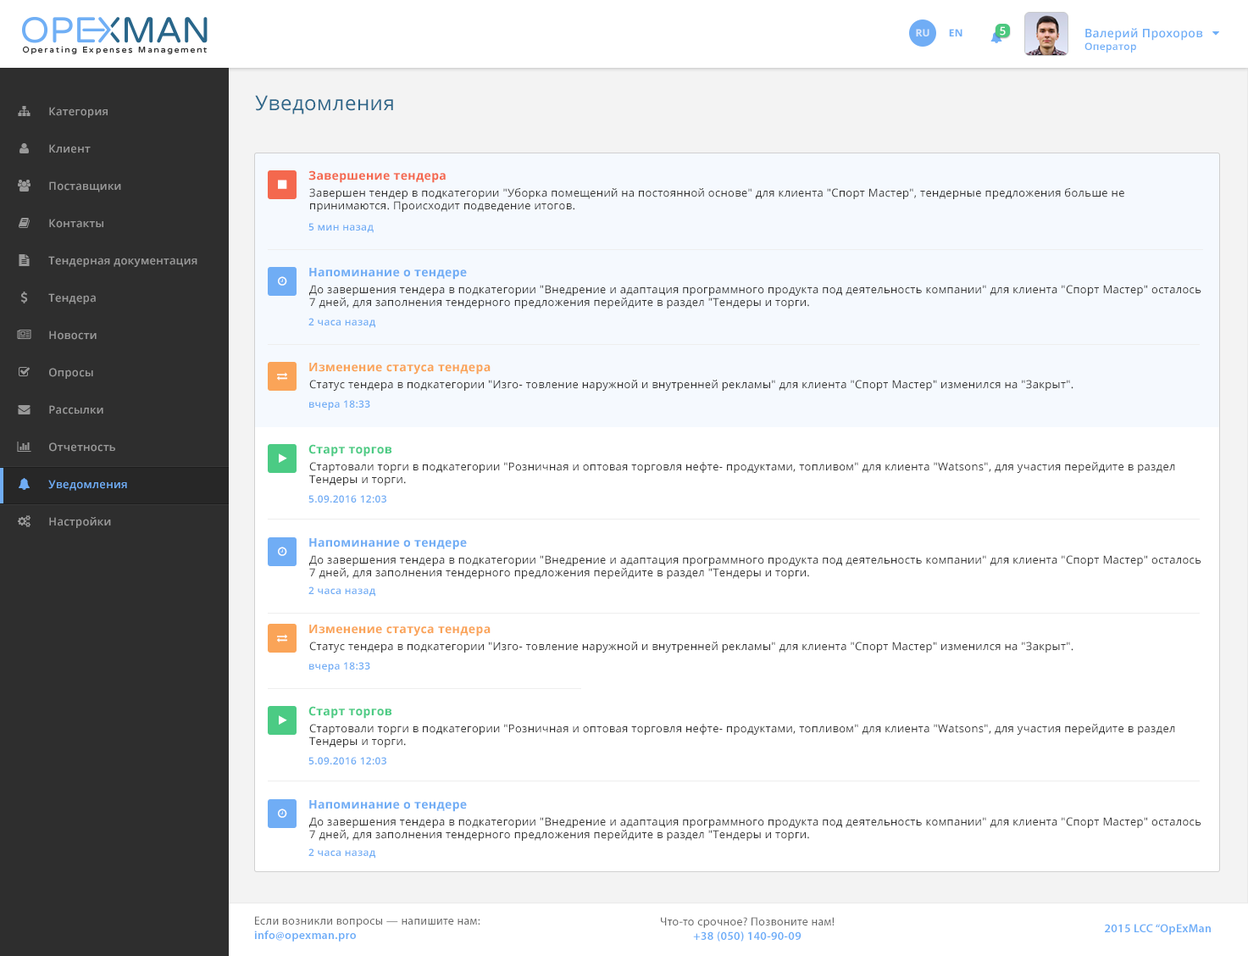
<style>
.page{position:relative;width:1248px;height:956px;background:#ffffff}
.page>*{position:absolute;margin:0}
.t1{font:10.2px "OpenSans-Bold";letter-spacing:0.025em;color:#dbe8fc;text-transform:uppercase}
.t2{font:10.2px "OpenSans-Bold";letter-spacing:0.025em;color:#6faff8;text-transform:uppercase}
.t3{font:11px "OpenSans-Semibold";letter-spacing:0.025em;color:#ffffff}
.t4{font:11.8px "OpenSans-Semibold";letter-spacing:0.025em;color:#6eaef7}
.t5{font:10.2px "OpenSans-Semibold";letter-spacing:0.025em;color:#6eaef7}
.t6{font:20.3px "OpenSans";letter-spacing:0.025em;color:#2c6689}
.t7{font:11px "OpenSans-Semibold";letter-spacing:0.025em;color:#999999}
.t8{font:11.9px "OpenSans-Bold";letter-spacing:0.025em;color:#f4684e}
.t9{font:11px "OpenSans";letter-spacing:0.025em;color:#333333}
.t10{font:10.2px "OpenSans-Semibold";letter-spacing:0.025em;color:#70adf5}
.t11{font:11.9px "OpenSans-Bold";letter-spacing:0.025em;color:#70adf5}
.t12{font:11.9px "OpenSans-Bold";letter-spacing:0.025em;color:#faa458}
.t13{font:11.9px "OpenSans-Bold";letter-spacing:0.025em;color:#4bcb84}
.t14{font:11px "OpenSans-Semibold";letter-spacing:0.025em;color:#70adf5}
.t15{font:11.8px "MyriadPro-Regular";letter-spacing:0.025em;color:#696969}
.t16{font:11.8px "MyriadPro-Semibold";letter-spacing:0.025em;color:#6eaef8}
</style>
<div class="page">
<p class="t1" style="left:916px;top:29px;width:13px;height:7px">Ru</p>
<p class="t2" style="left:949px;top:29px;width:13px;height:7px">EN</p>
<p class="t3" style="left:1000px;top:26px;width:6px;height:10px">5</p>
<p class="t4" style="left:1084px;top:28px;width:119px;height:25px">Валерий Прохоров<br><span class="t5">Оператор</span></p>
<p class="t6" style="left:255px;top:95px;width:138px;height:19px">Уведомления</p>
<p class="t7" style="left:49px;top:107px;width:59px;height:11px">Категория</p>
<p class="t7" style="left:49px;top:144px;width:42px;height:9px">Клиент</p>
<p class="t8" style="left:308px;top:170px;width:138px;height:13px">Завершение тендера</p>
<p class="t7" style="left:49px;top:181px;width:72px;height:11px">Поставщики</p>
<p class="t9" style="left:309px;top:188px;width:815px;height:24px">Завершен тендер в подкатегории "Уборка помещений на постоянной основе" для клиента "Спорт Мастер", тендерные предложения больше не принимаются. Происходит подведение итогов.</p>
<p class="t7" style="left:49px;top:219px;width:54px;height:9px">Контакты</p>
<p class="t10" style="left:308px;top:223px;width:66px;height:10px">5 мин назад</p>
<p class="t7" style="left:48px;top:256px;width:149px;height:11px">Тендерная документация</p>
<p class="t11" style="left:309px;top:268px;width:158px;height:12px">Напоминание о тендере</p>
<p class="t7" style="left:48px;top:293px;width:48px;height:11px">Тендера</p>
<p class="t9" style="left:309px;top:285px;width:892px;height:23px">До завершения тендера в подкатегории "Внедрение и адаптация программного продукта под деятельность компании" для клиента "Спорт Мастер" осталось 7 дней, для заполнения тендерного предложения перейдите в раздел "Тендеры и торги.</p>
<p class="t10" style="left:308px;top:318px;width:67px;height:10px">2 часа назад</p>
<p class="t7" style="left:49px;top:330px;width:48px;height:10px">Новости</p>
<p class="t12" style="left:309px;top:363px;width:182px;height:11px">Изменение статуса тендера</p>
<p class="t7" style="left:49px;top:368px;width:44px;height:11px">Опросы</p>
<p class="t9" style="left:309px;top:380px;width:764px;height:11px">Статус тендера в подкатегории "Изго- товление наружной и внутренней рекламы" для клиента "Спорт Мастер" изменился на "Закрыт".</p>
<p class="t10" style="left:309px;top:400px;width:61px;height:10px">вчера 18:33</p>
<p class="t7" style="left:49px;top:405px;width:54px;height:9px">Рассылки</p>
<p class="t7" style="left:49px;top:442px;width:66px;height:10px">Отчетность</p>
<p class="t13" style="left:308px;top:444px;width:84px;height:13px">Старт торгов</p>
<p class="t9" style="left:309px;top:462px;width:866px;height:23px">Стартовали торги в подкатегории "Розничная и оптовая торговля нефте- продуктами, топливом" для клиента "Watsons", для участия перейдите в раздел Тендеры и торги.</p>
<p class="t14" style="left:48px;top:479px;width:79px;height:12px">Уведомления</p>
<p class="t10" style="left:308px;top:495px;width:78px;height:7px">5.09.2016 12:03</p>
<p class="t7" style="left:49px;top:517px;width:62px;height:11px">Настройки</p>
<p class="t11" style="left:309px;top:538px;width:158px;height:12px">Напоминание о тендере</p>
<p class="t9" style="left:309px;top:555px;width:892px;height:24px">До завершения тендера в подкатегории "Внедрение и адаптация программного продукта под деятельность компании" для клиента "Спорт Мастер" осталось 7 дней, для заполнения тендерного предложения перейдите в раздел "Тендеры и торги.</p>
<p class="t10" style="left:308px;top:586px;width:67px;height:10px">2 часа назад</p>
<p class="t12" style="left:309px;top:624px;width:182px;height:12px">Изменение статуса тендера</p>
<p class="t9" style="left:309px;top:641px;width:764px;height:11px">Статус тендера в подкатегории "Изго- товление наружной и внутренней рекламы" для клиента "Спорт Мастер" изменился на "Закрыт".</p>
<p class="t10" style="left:309px;top:662px;width:61px;height:10px">вчера 18:33</p>
<p class="t13" style="left:308px;top:706px;width:84px;height:12px">Старт торгов</p>
<p class="t9" style="left:309px;top:723px;width:866px;height:24px">Стартовали торги в подкатегории "Розничная и оптовая торговля нефте- продуктами, топливом" для клиента "Watsons", для участия перейдите в раздел Тендеры и торги.</p>
<p class="t10" style="left:308px;top:757px;width:78px;height:7px">5.09.2016 12:03</p>
<p class="t11" style="left:309px;top:800px;width:158px;height:12px">Напоминание о тендере</p>
<p class="t9" style="left:309px;top:817px;width:892px;height:23px">До завершения тендера в подкатегории "Внедрение и адаптация программного продукта под деятельность компании" для клиента "Спорт Мастер" осталось 7 дней, для заполнения тендерного предложения перейдите в раздел "Тендеры и торги.</p>
<p class="t10" style="left:308px;top:848px;width:67px;height:10px">2 часа назад</p>
<p class="t15" style="left:254px;top:916px;width:226px;height:25px">Если возникли вопросы — напишите нам:<br><span class="t16">info@opexman.pro</span></p>
<p class="t15" style="left:661px;top:917px;width:173px;height:24px;text-align:center">Что-то срочное? Позвоните нам!<br><span class="t16">+38 (050) 140-90-09</span></p>
<p class="t16" style="left:1105px;top:923px;width:106px;height:11px">2015 LCC “OpExMan</p>
</div>
